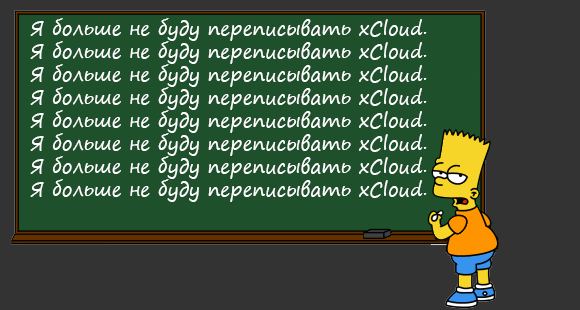
<style>
.page{position:relative;width:580px;height:310px;background:#1e502b}
.page>*{position:absolute;margin:0}
.t1{font:19px "SegoePrint";color:#ffffff}
</style>
<div class="page">
<p class="t1" style="left:30px;top:18px;width:397px;height:23px">Я больше не буду переписывать xCloud.</p>
<p class="t1" style="left:30px;top:41px;width:397px;height:23px">Я больше не буду переписывать xCloud.</p>
<p class="t1" style="left:30px;top:64px;width:397px;height:23px">Я больше не буду переписывать xCloud.</p>
<p class="t1" style="left:30px;top:87px;width:397px;height:23px">Я больше не буду переписывать xCloud.</p>
<p class="t1" style="left:30px;top:110px;width:397px;height:23px">Я больше не буду переписывать xCloud.</p>
<p class="t1" style="left:30px;top:133px;width:397px;height:23px">Я больше не буду переписывать xCloud.</p>
<p class="t1" style="left:30px;top:156px;width:397px;height:23px">Я больше не буду переписывать xCloud.</p>
<p class="t1" style="left:30px;top:179px;width:397px;height:23px">Я больше не буду переписывать xCloud.</p>
</div>
